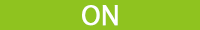
<style>
.page{position:relative;width:200px;height:30px;background:#8fc31f}
.page>*{position:absolute;margin:0}
.t1{font:26px "KozGoPr6N-Regular";color:#ffffff;font-weight:bold}
</style>
<div class="page">
<p class="t1" style="left:82px;top:5px;width:36px;height:21px">ON</p>
</div>
